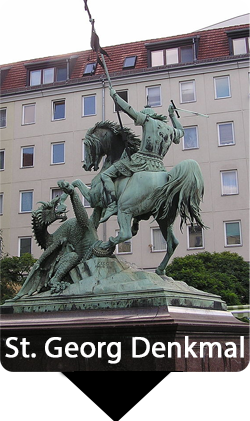
<style>
.page{position:relative;width:250px;height:421px}
.page>*{position:absolute;margin:0}
.t1{font:29.3px "MyriadPro-Regular";color:#ffffff;font-weight:bold}
.t2{font:29.3px "MyriadPro-Regular";color:#ffffff}
</style>
<div class="page">
<p class="t1" style="left:5px;top:336px;width:239px;height:28px"><span class="t2"> </span>St. Georg Denkmal</p>
</div>
